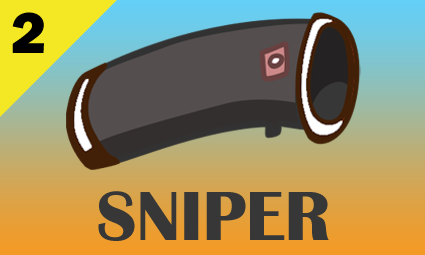
<style>
.page{position:relative;width:425px;height:255px}
.page>*{position:absolute;margin:0}
.t1{font:60px "FranklinGothic-Heavy";color:#000000}
.t2{font:72px "BritannicBold";color:#373737}
</style>
<div class="page">
<p class="t1" style="left:12px;top:12px;width:32px;height:41px">2</p>
<p class="t2" style="left:98px;top:191px;width:231px;height:50px">SNIPER</p>
</div>
